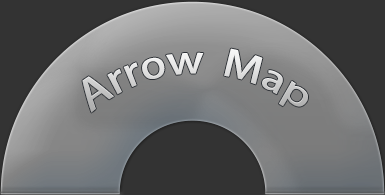
<style>
.page{position:relative;width:385px;height:195px;background:#333333}
.page>*{position:absolute;margin:0}
.t1{font:37.5px "AdobeHeitiStd-Regular"}
</style>
<div class="page">
<p class="t1" style="left:82px;top:48px;width:226px;height:65px;text-align:center">Arrow  Map</p>
</div>
